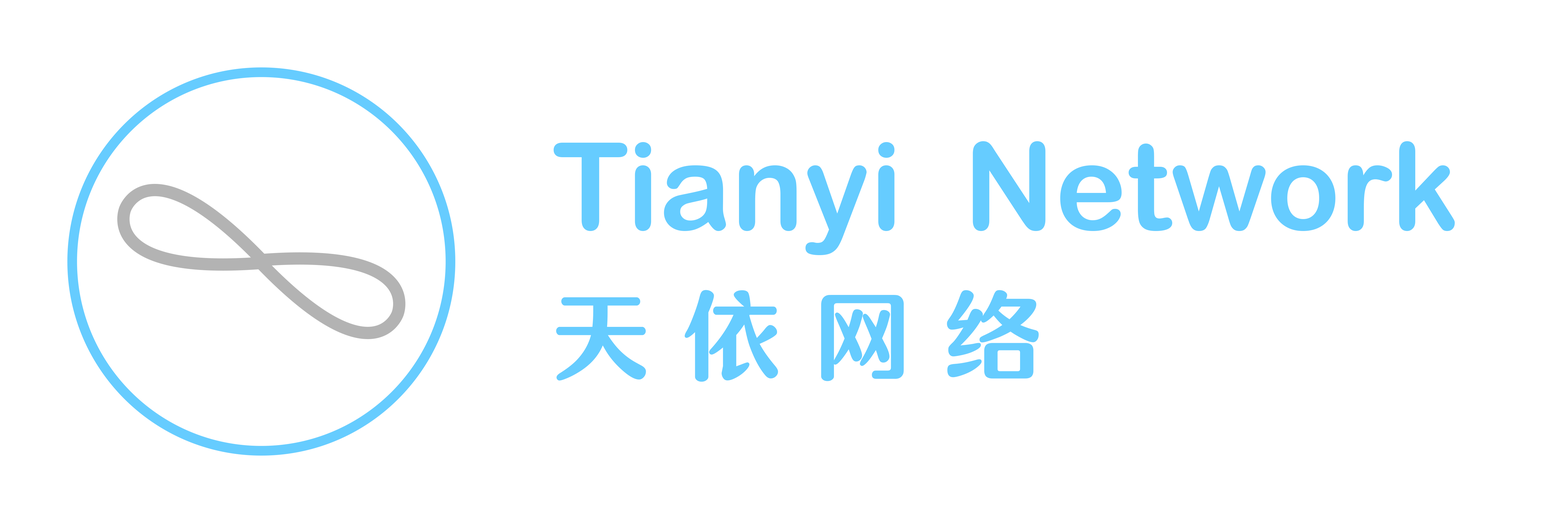
<style>
.page{position:relative;width:1568px;height:523px;background:#ffffff}
.page>*{position:absolute;margin:0}
.t1{font:121px/137.9px "ArialRoundedMTBold";color:#66ccff}
.t2{font:96.8px/137.9px "TensentypeQinYuanJ-W4Bold";letter-spacing:0.35em;color:#66ccff}
</style>
<div class="page">
<p class="t1" style="left:553px;top:141px;width:902px;height:241px;text-align:justify">Tianyi  Network<br><span class="t2">天依网络</span></p>
</div>
